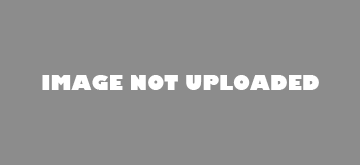
<style>
.page{position:relative;width:360px;height:165px;background:#8c8c8c}
.page>*{position:absolute;margin:0}
.t1{font:20px "GillSans-UltraBold";color:#ffffff}
</style>
<div class="page">
<p class="t1" style="left:42px;top:75px;width:277px;height:15px">IMAGE NOT UPLOADED</p>
</div>
